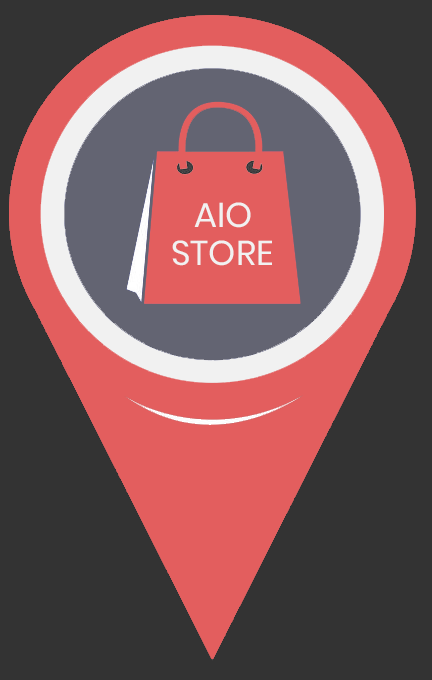
<style>
.page{position:relative;width:432px;height:680px;background:#333333}
.page>*{position:absolute;margin:0}
.t1{font:34.4px "Poppins-Regular";color:#f1f1f1}
</style>
<div class="page">
<p class="t1" style="left:194px;top:202px;width:57px;height:26px">AIO</p>
<p class="t1" style="left:172px;top:240px;width:100px;height:26px">STORE</p>
</div>
